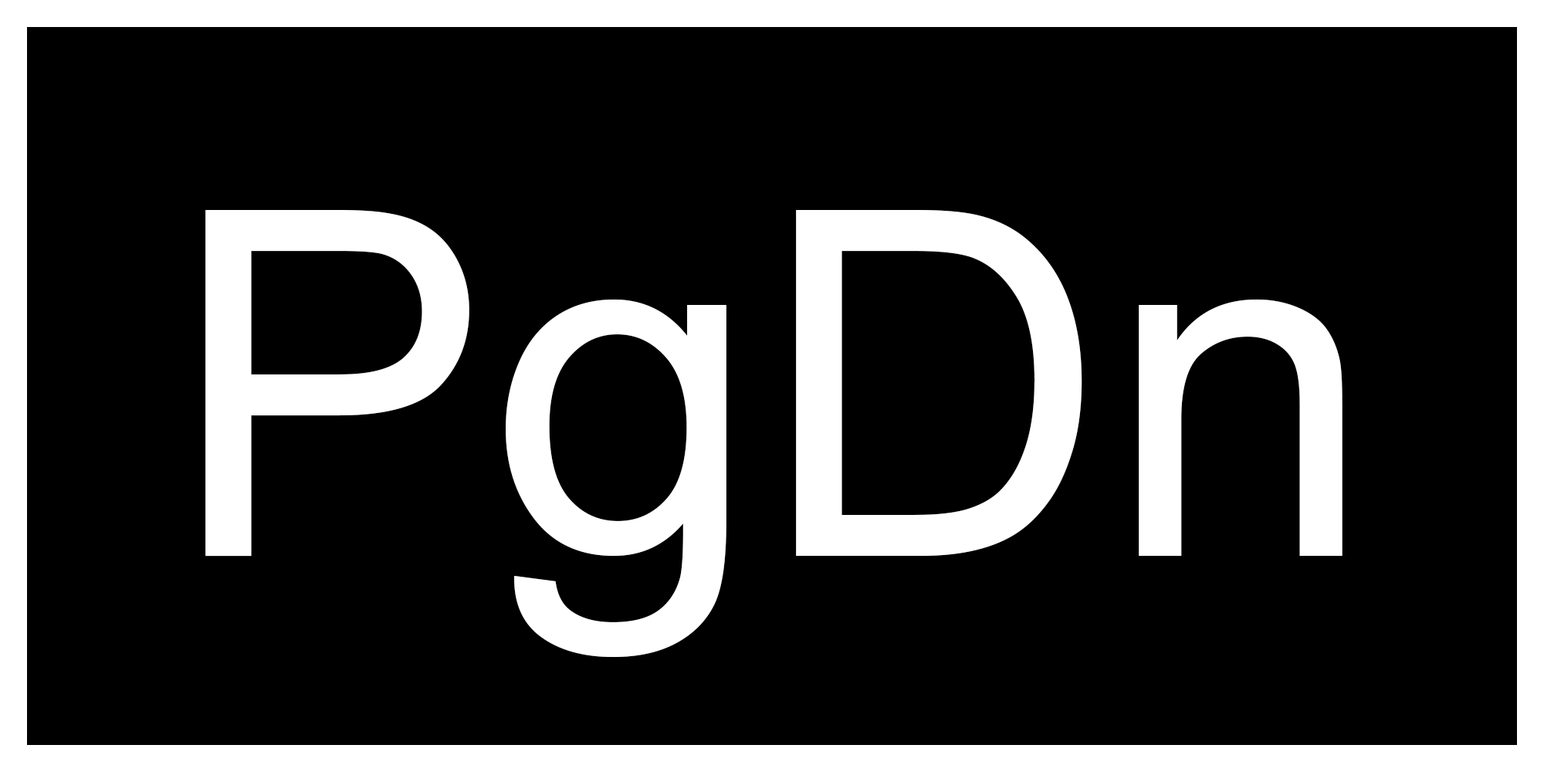
<style>
.page{position:relative;width:1544px;height:772px;background:#000000}
.page>*{position:absolute;margin:0}
.t1{font:482.6px "ArialMT";color:#ffffff}
</style>
<div class="page">
<p class="t1" style="left:205px;top:210px;width:1138px;height:447px">PgDn</p>
</div>
